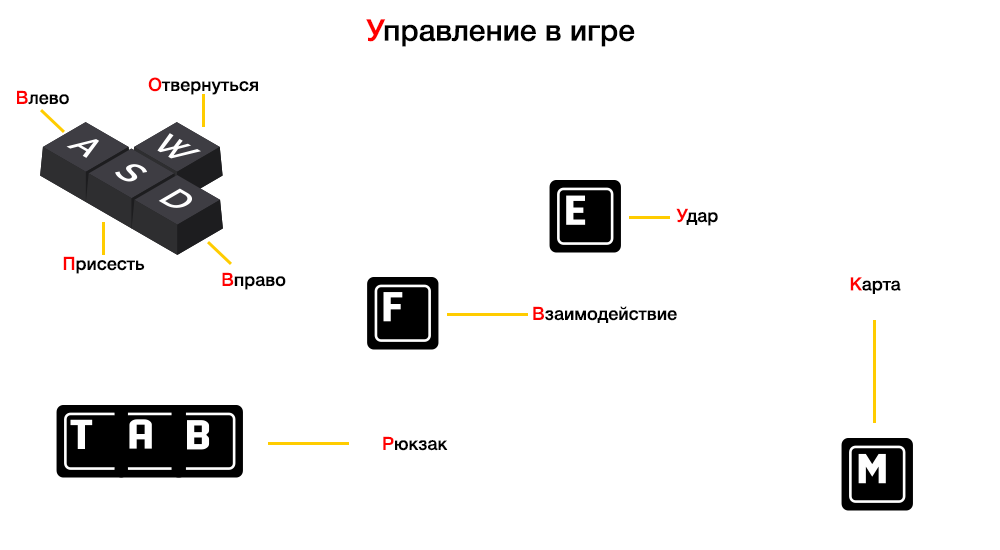
<style>
.page{position:relative;width:1000px;height:550px;background:#ffffff}
.page>*{position:absolute;margin:0}
.t1{font:30px "HelveticaNeueCyr-Medium";color:#000000}
.t2{font:30px "HelveticaNeueCyr-Medium";color:#ff0000}
.t3{font:18px "HelveticaNeueCyr-Medium";color:#000000}
.t4{font:18px "HelveticaNeueCyr-Medium";color:#ff0000}
</style>
<div class="page">
<p class="t1" style="left:366px;top:19px;width:269px;height:28px"><span class="t2">У</span>правление в игре</p>
<p class="t3" style="left:148px;top:77px;width:110px;height:18px"><span class="t4">О</span>твернуться</p>
<p class="t3" style="left:17px;top:90px;width:52px;height:15px"><span class="t4">В</span>лево</p>
<p class="t3" style="left:676px;top:208px;width:42px;height:18px"><span class="t4">У</span>дар</p>
<p class="t3" style="left:63px;top:256px;width:82px;height:18px"><span class="t4">П</span>рисесть</p>
<p class="t3" style="left:222px;top:272px;width:64px;height:18px"><span class="t4">В</span>право</p>
<p class="t3" style="left:850px;top:277px;width:51px;height:17px"><span class="t4">К</span>арта</p>
<p class="t3" style="left:533px;top:306px;width:144px;height:17px"><span class="t4">В</span>заимодействие</p>
<p class="t3" style="left:383px;top:436px;width:65px;height:15px"><span class="t4">Р</span>юкзак</p>
</div>
